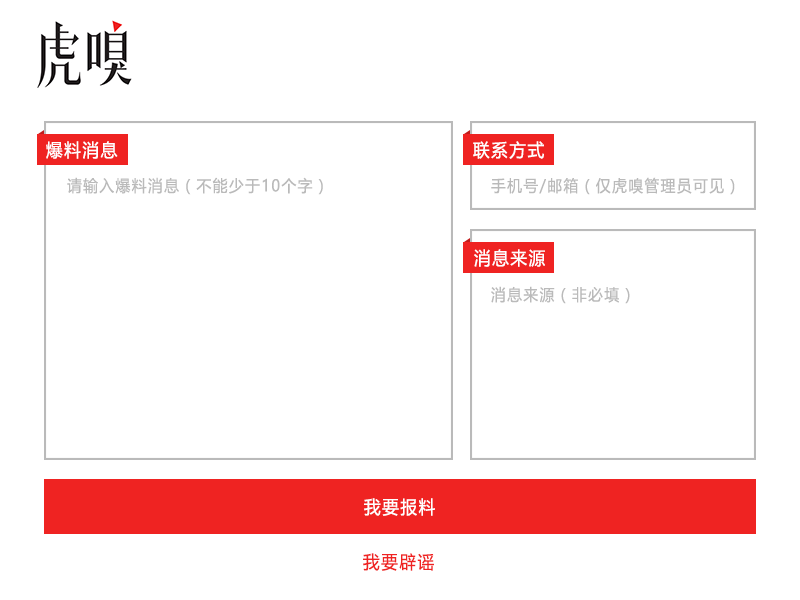
<style>
.page{position:relative;width:800px;height:600px;background:#ffffff}
.page>*{position:absolute;margin:0}
.t1{font:18px "MicrosoftYaHei";letter-spacing:0.1em;color:#ffffff;scale:0.92 1}
.t2{font:16px "MicrosoftYaHei";letter-spacing:0.1em;color:#bababa;scale:0.92 1}
.t3{font:18px "MicrosoftYaHei";letter-spacing:0.1em;color:#ef2322;scale:0.92 1}
</style>
<div class="page">
<p class="t1" style="left:46px;top:141px;width:72px;height:18px">爆料消息</p>
<p class="t1" style="left:473px;top:141px;width:71px;height:18px">联系方式</p>
<p class="t2" style="left:67px;top:177px;width:256px;height:18px">请输入爆料消息（不能少于10个字）</p>
<p class="t2" style="left:491px;top:177px;width:244px;height:18px">手机号/邮箱（仅虎嗅管理员可见）</p>
<p class="t1" style="left:474px;top:249px;width:71px;height:18px">消息来源</p>
<p class="t2" style="left:491px;top:286px;width:139px;height:18px">消息来源（非必填）</p>
<p class="t1" style="left:364px;top:498px;width:71px;height:18px">我要报料</p>
<p class="t3" style="left:363px;top:553px;width:71px;height:18px">我要辟谣</p>
</div>
